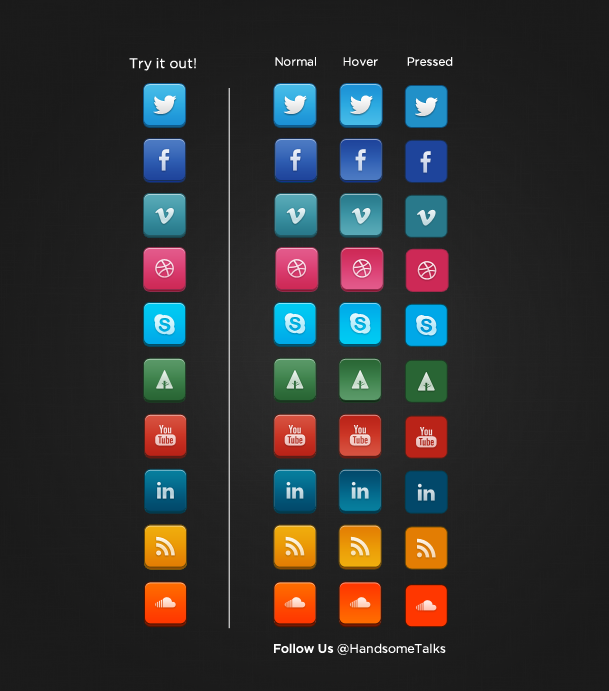
<style>
.page{position:relative;width:609px;height:691px}
.page>*{position:absolute;margin:0}
.t1{font:13.8px "Gotham-Book";color:#ffffff}
.t2{font:11.8px "Gotham-Book";color:#ffffff}
.t3{font:12.3px "Gotham-Book";color:#ffffff}
.t4{font:12.3px "Gotham-Medium";color:#ffffff}
</style>
<div class="page">
<p class="t1" style="left:129px;top:58px;width:67px;height:13px">Try it out!</p>
<p class="t2" style="left:275px;top:57px;width:41px;height:9px">Normal</p>
<p class="t2" style="left:343px;top:57px;width:35px;height:9px">Hover</p>
<p class="t2" style="left:407px;top:57px;width:46px;height:9px">Pressed</p>
<p class="t3" style="left:274px;top:643px;width:172px;height:12px"><span class="t4">Follow Us </span>@HandsomeTalks</p>
</div>
